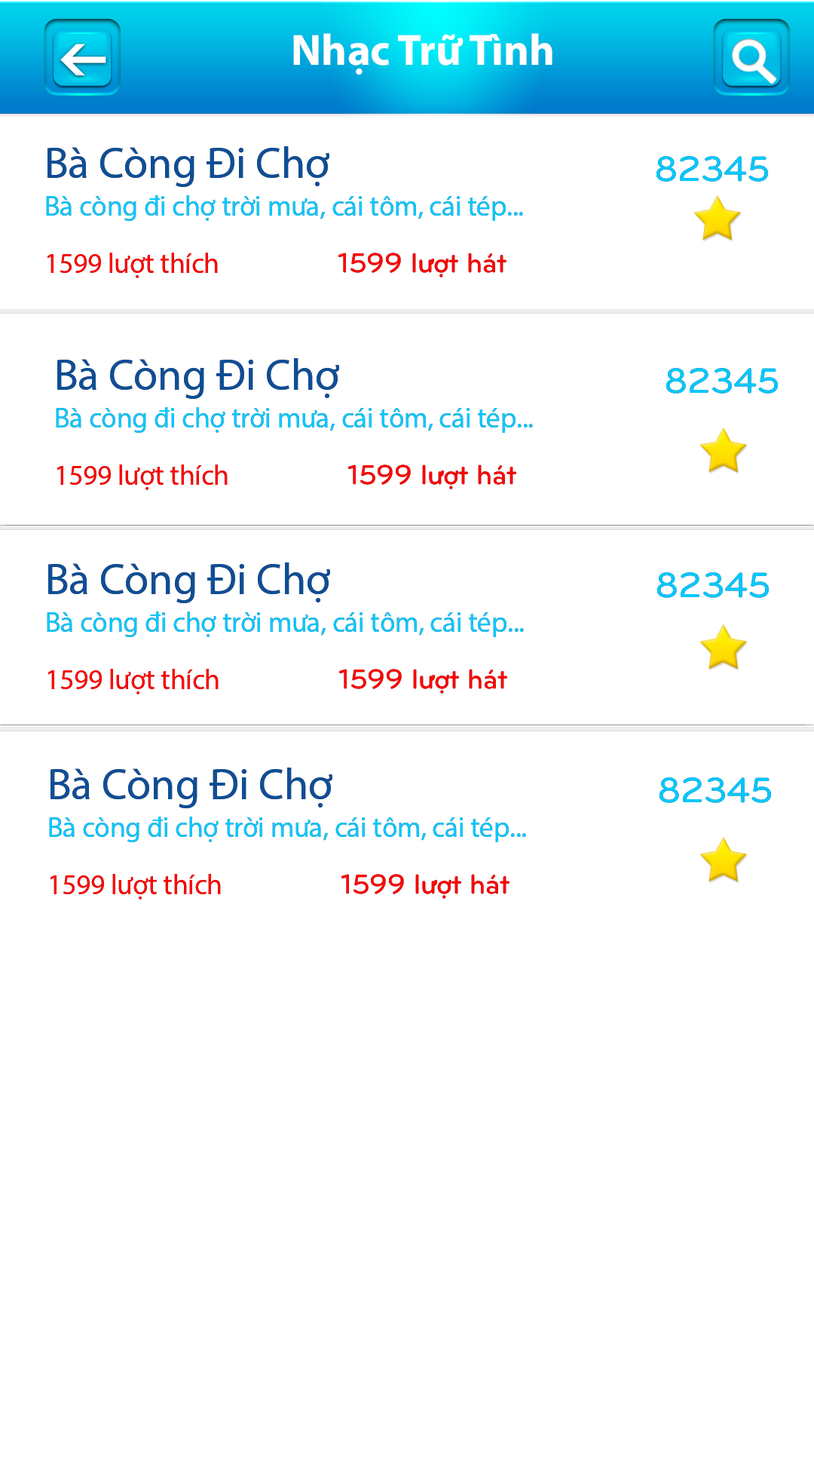
<style>
.page{position:relative;width:814px;height:1465px;background:#ffffff}
.page>*{position:absolute;margin:0}
.t1{font:44px "MyriadPro-Bold";color:#ffffff}
.t2{font:44px "MyriadPro-Regular";color:#0e4e96}
.t3{font:44px "MyriadPro-Regular";letter-spacing:-0.005em;color:#0e4e96}
.t4{font:36.4px "UTMBryantLGBold";letter-spacing:-0.005em;color:#00c8ff}
.t5{font:28.3px "MyriadPro-Regular";letter-spacing:-0.005em;color:#00c8ff}
.t6{font:28.3px "MyriadPro-Regular";letter-spacing:-0.005em;color:#ff0100}
.t7{font:28.3px "UTMBryantLGBold";letter-spacing:-0.005em;color:#ff0000}
</style>
<div class="page">
<p class="t1" style="left:293px;top:33px;width:260px;height:42px">Nhạc Trữ Tình</p>
<p class="t2" style="left:47px;top:146px;width:282px;height:41px"><span class="t3">B</span>à Còng Đi Chợ</p>
<p class="t4" style="left:657px;top:156px;width:111px;height:26px">82345</p>
<p class="t5" style="left:46px;top:195px;width:477px;height:26px">Bà còng đi chợ trời mưa, cái tôm, cái tép...</p>
<p class="t6" style="left:47px;top:253px;width:171px;height:25px">1599 lượt thích</p>
<p class="t7" style="left:338px;top:253px;width:169px;height:24px">1599 lượt hát</p>
<p class="t2" style="left:57px;top:358px;width:282px;height:41px"><span class="t3">B</span>à Còng Đi Chợ</p>
<p class="t4" style="left:666px;top:368px;width:112px;height:25px">82345</p>
<p class="t5" style="left:56px;top:407px;width:477px;height:26px">Bà còng đi chợ trời mưa, cái tôm, cái tép...</p>
<p class="t6" style="left:57px;top:464px;width:171px;height:26px">1599 lượt thích</p>
<p class="t7" style="left:348px;top:464px;width:168px;height:25px">1599 lượt hát</p>
<p class="t2" style="left:48px;top:562px;width:282px;height:41px"><span class="t3">B</span>à Còng Đi Chợ</p>
<p class="t4" style="left:657px;top:572px;width:112px;height:26px">82345</p>
<p class="t5" style="left:47px;top:611px;width:477px;height:26px">Bà còng đi chợ trời mưa, cái tôm, cái tép...</p>
<p class="t6" style="left:47px;top:669px;width:172px;height:25px">1599 lượt thích</p>
<p class="t7" style="left:339px;top:669px;width:168px;height:25px">1599 lượt hát</p>
<p class="t2" style="left:51px;top:767px;width:281px;height:41px"><span class="t3">B</span>à Còng Đi Chợ</p>
<p class="t4" style="left:660px;top:777px;width:111px;height:26px">82345</p>
<p class="t5" style="left:49px;top:816px;width:477px;height:26px">Bà còng đi chợ trời mưa, cái tôm, cái tép...</p>
<p class="t6" style="left:50px;top:874px;width:171px;height:25px">1599 lượt thích</p>
<p class="t7" style="left:341px;top:874px;width:169px;height:25px">1599 lượt hát</p>
</div>
